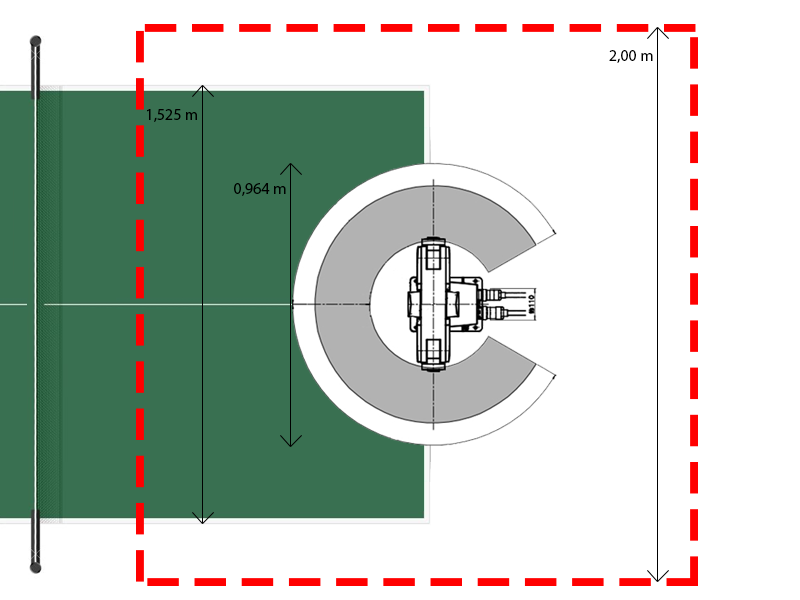
<style>
.page{position:relative;width:800px;height:600px;background:#ffffff}
.page>*{position:absolute;margin:0}
.t1{font:12px "MyriadPro-Regular";color:#000000}
</style>
<div class="page">
<p class="t1" style="left:609px;top:50px;width:44px;height:13px">2,00 m</p>
<p class="t1" style="left:147px;top:109px;width:50px;height:13px">1,525 m</p>
<p class="t1" style="left:234px;top:183px;width:52px;height:13px">0,964 m</p>
</div>
